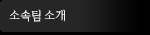
<style>
.page{position:relative;width:150px;height:35px;background:#262626}
.page>*{position:absolute;margin:0}
.t1{font:12px "TSThgrgl";color:#ffffff;scale:0.94 1}
</style>
<div class="page">
<p class="t1" style="left:9px;top:9px;width:56px;height:13px">소속팀 소개</p>
</div>
